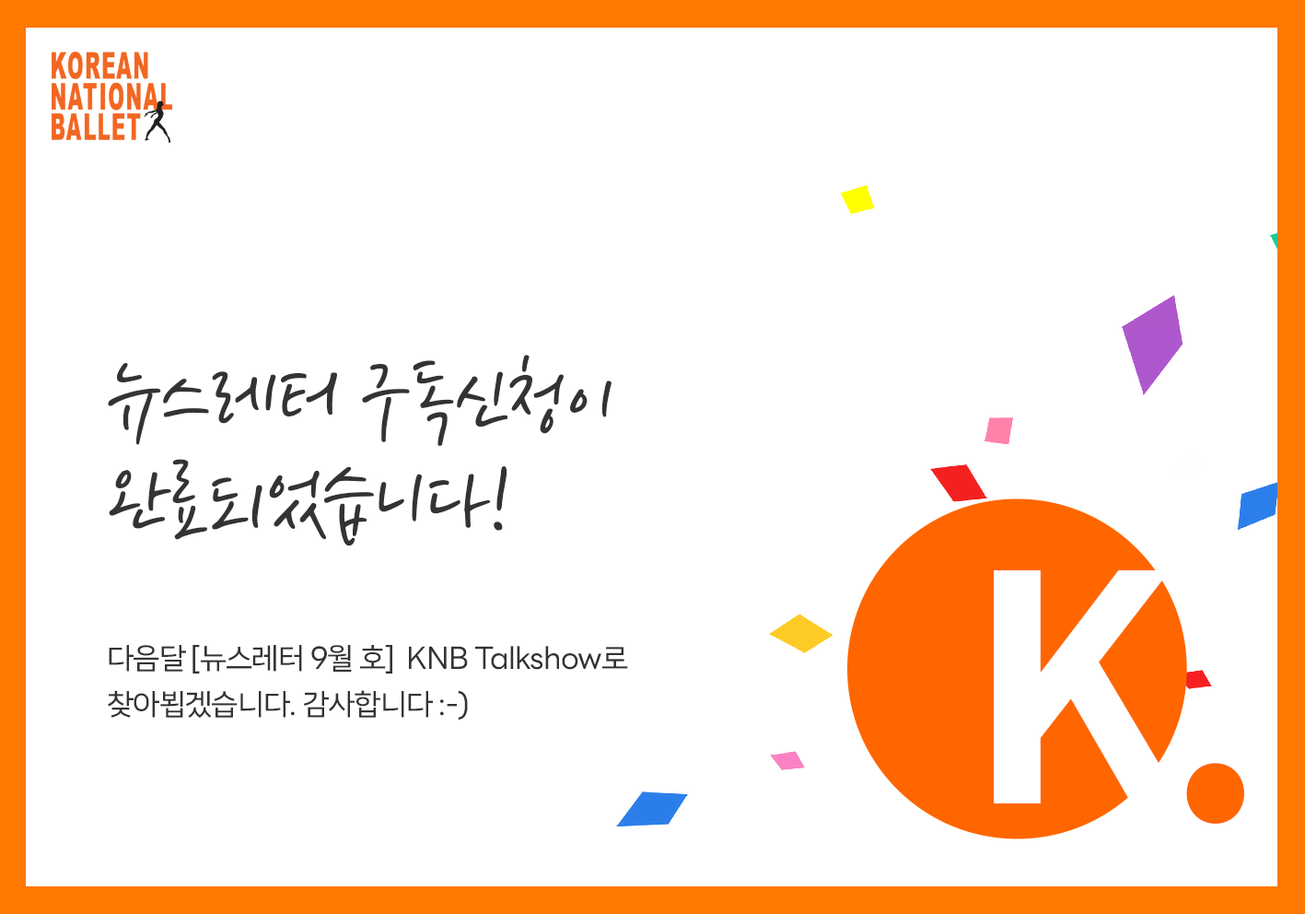
<style>
.page{position:relative;width:1305px;height:914px;background:#ffffff}
.page>*{position:absolute;margin:0}
.t1{font:92.2px/101.4px "THEFACESHOP";letter-spacing:-0.025em;color:#333333}
.t2{font:315.3px "NotoSansKR-Bold";letter-spacing:-0.025em;color:#ffffff}
.t3{font:30.4px/46.1px "LINESeedSansKR-Regular";letter-spacing:-0.025em;color:#333333}
.t4{font:315.3px "NotoSansKR-Bold";letter-spacing:-0.025em;color:#ff6600}
</style>
<div class="page">
<p class="t1" style="left:108px;top:355px;width:504px;height:191px">뉴스레터 구독신청이<br>완료되었습니다!</p>
<p class="t2" style="left:994px;top:570px;width:189px;height:233px">K</p>
<p class="t3" style="left:108px;top:645px;width:520px;height:74px">다음달 [뉴스레터 9월 호]  KNB Talkshow로<br>찾아뵙겠습니다. 감사합니다 :-)</p>
<p class="t4" style="left:1186px;top:763px;width:58px;height:60px">.</p>
</div>
